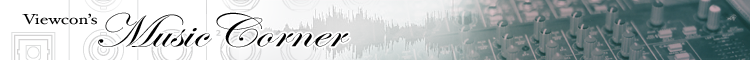
<style>
.page{position:relative;width:750px;height:60px;background:#ffffff}
.page>*{position:absolute;margin:0}
.t1{font:14.4px "HoeflerText-Regular";color:#000000;scale:1.25 1}
.t2{font:48px "EdwardianScriptITC";color:#000000;scale:1.25 1}
</style>
<div class="page">
<p class="t1" style="left:22px;top:13px;width:75px;height:12px">Viewcon’s</p>
<p class="t2" style="left:98px;top:12px;width:252px;height:36px">MusicCorner</p>
</div>
